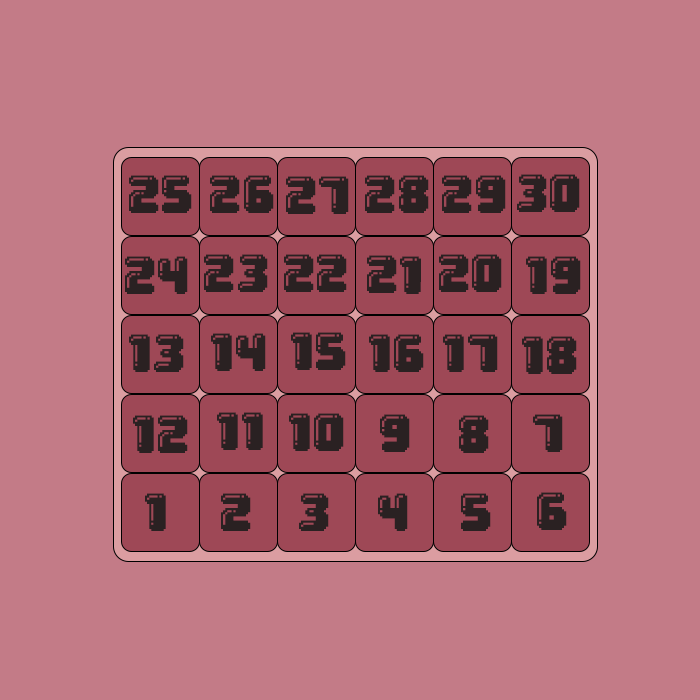
<style>
.page{position:relative;width:700px;height:700px;background:#c37b87}
.page>*{position:absolute;margin:0}
.t1{font:66.7px "Gumball";color:#2a2122}
</style>
<div class="page">
<p class="t1" style="left:517px;top:174px;width:63px;height:38px">30</p>
<p class="t1" style="left:129px;top:175px;width:63px;height:38px">25</p>
<p class="t1" style="left:210px;top:175px;width:64px;height:38px">26</p>
<p class="t1" style="left:286px;top:176px;width:63px;height:38px">27</p>
<p class="t1" style="left:365px;top:175px;width:64px;height:38px">28</p>
<p class="t1" style="left:442px;top:175px;width:64px;height:38px">29</p>
<p class="t1" style="left:125px;top:256px;width:63px;height:38px">24</p>
<p class="t1" style="left:204px;top:254px;width:64px;height:38px">23</p>
<p class="t1" style="left:284px;top:254px;width:63px;height:38px">22</p>
<p class="t1" style="left:367px;top:255px;width:54px;height:39px">21</p>
<p class="t1" style="left:439px;top:254px;width:63px;height:38px">20</p>
<p class="t1" style="left:526px;top:256px;width:55px;height:38px">19</p>
<p class="t1" style="left:129px;top:334px;width:55px;height:38px">13</p>
<p class="t1" style="left:211px;top:333px;width:55px;height:38px">14</p>
<p class="t1" style="left:291px;top:332px;width:55px;height:38px">15</p>
<p class="t1" style="left:369px;top:334px;width:55px;height:38px">16</p>
<p class="t1" style="left:443px;top:334px;width:55px;height:38px">17</p>
<p class="t1" style="left:522px;top:336px;width:55px;height:38px">18</p>
<p class="t1" style="left:217px;top:412px;width:46px;height:38px">11</p>
<p class="t1" style="left:289px;top:413px;width:55px;height:38px">10</p>
<p class="t1" style="left:380px;top:414px;width:30px;height:38px">9</p>
<p class="t1" style="left:533px;top:414px;width:30px;height:38px">7</p>
<p class="t1" style="left:133px;top:415px;width:55px;height:38px">12</p>
<p class="t1" style="left:459px;top:415px;width:30px;height:38px">8</p>
<p class="t1" style="left:145px;top:493px;width:21px;height:38px">1</p>
<p class="t1" style="left:221px;top:493px;width:30px;height:38px">2</p>
<p class="t1" style="left:299px;top:493px;width:30px;height:38px">3</p>
<p class="t1" style="left:378px;top:493px;width:30px;height:38px">4</p>
<p class="t1" style="left:461px;top:493px;width:30px;height:38px">5</p>
<p class="t1" style="left:537px;top:492px;width:30px;height:38px">6</p>
</div>
